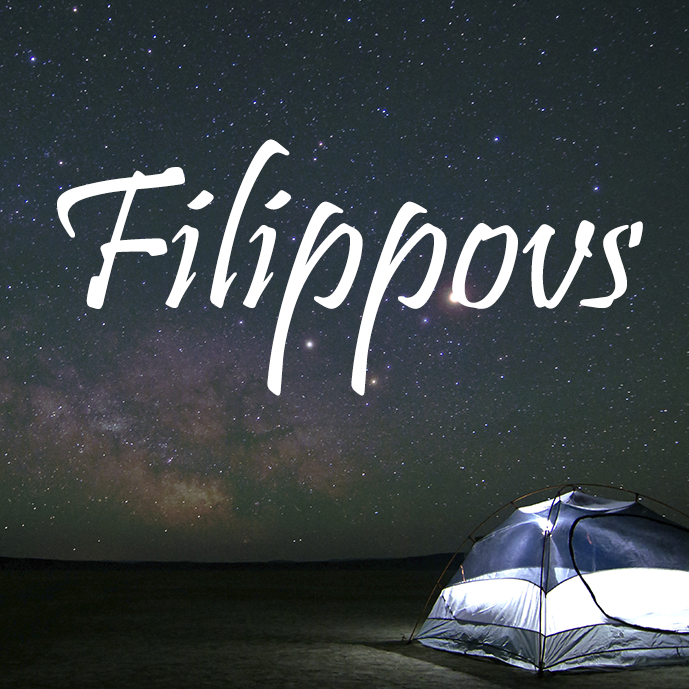
<style>
.page{position:relative;width:689px;height:689px}
.page>*{position:absolute;margin:0}
.t1{font:203.7px "Pristina-Regular";color:#ffffff}
</style>
<div class="page">
<p class="t1" style="left:57px;top:139px;width:586px;height:257px">Filippovs</p>
</div>
